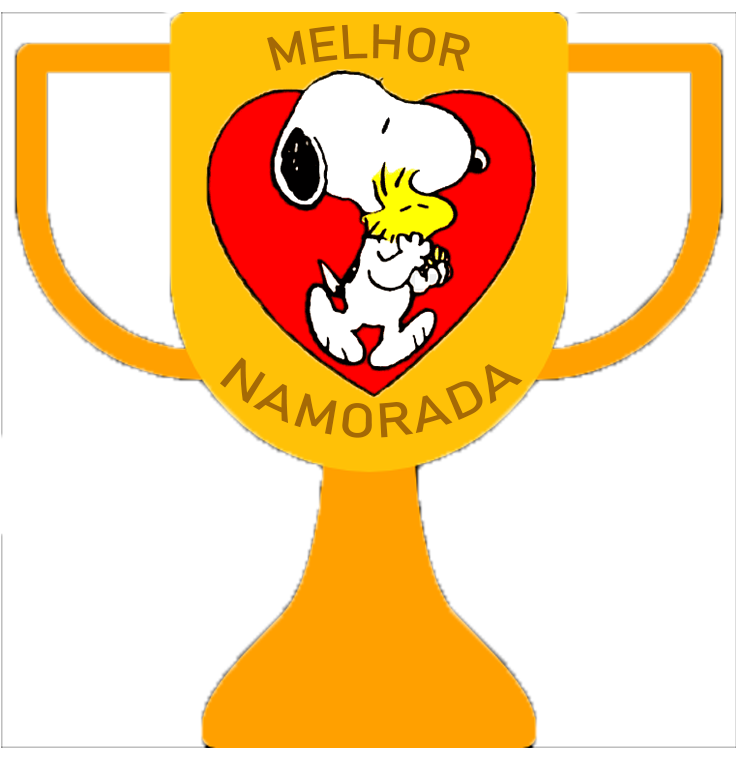
<style>
.page{position:relative;width:736px;height:761px;background:#ffffff}
.page>*{position:absolute;margin:0}
.t1{font:47.8px "Bahnschrift";color:#a56905}
</style>
<div class="page">
<p class="t1" style="left:267px;top:24px;width:203px;height:48px">MELHOR</p>
<p class="t1" style="left:219px;top:357px;width:304px;height:81px">NAMORADA</p>
</div>
